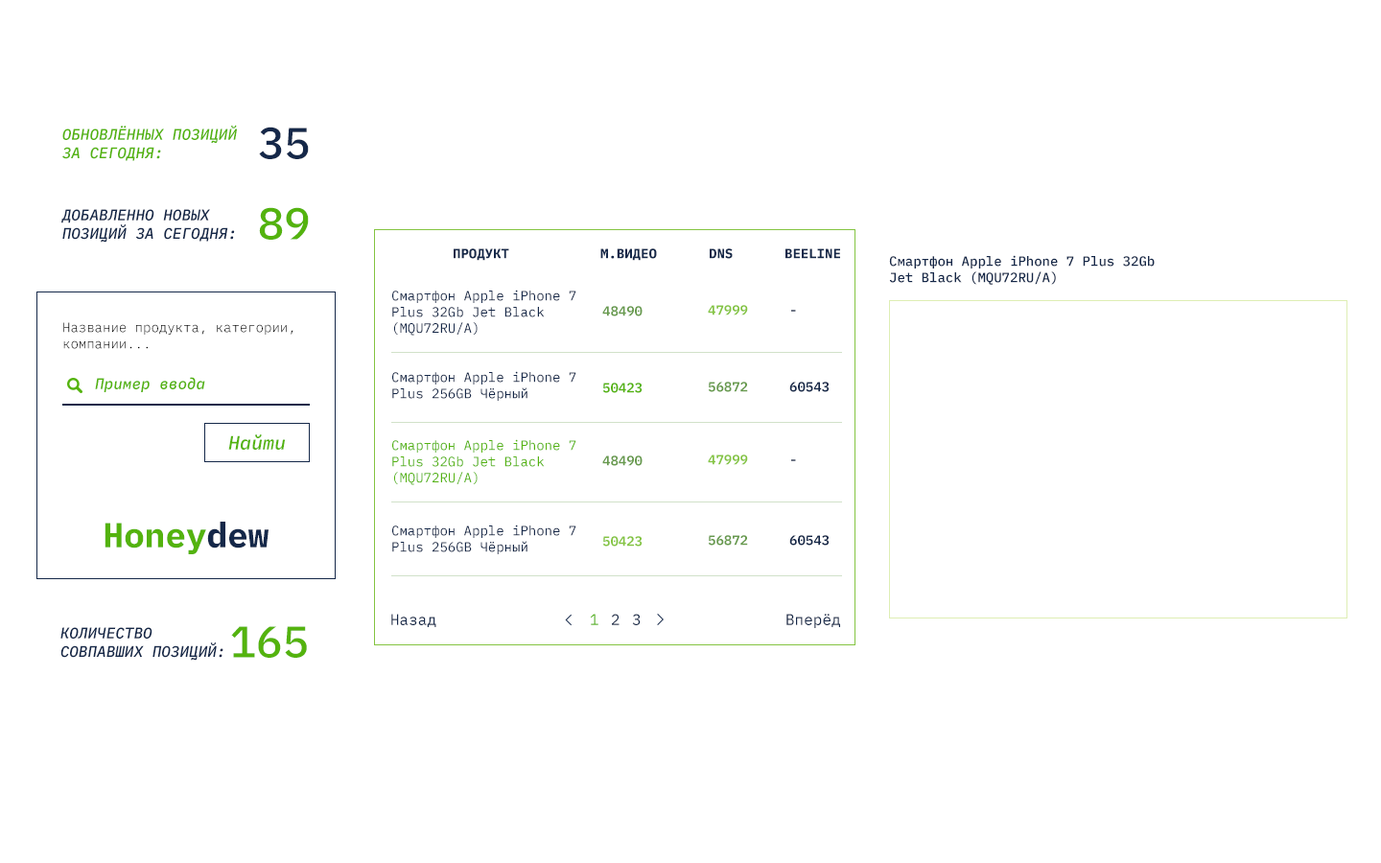
<style>
.page{position:relative;width:1381px;height:863px;background:#ffffff}
.page>*{position:absolute;margin:0}
.t1{font:15.3px "IBMPlexMono-MediumItalic";color:#54b30e;text-transform:uppercase}
.t2{font:44.1px "IBMPlexMono-Medium";color:#152849;text-transform:uppercase}
.t3{font:15.3px "IBMPlexMono-MediumItalic";color:#152849;text-transform:uppercase}
.t4{font:44.1px "IBMPlexMono-Medium";color:#54b30e;text-transform:uppercase}
.t5{font:13.4px "IBMPlexMono-Bold";color:#152849;text-transform:uppercase}
.t6{font:13.4px "IBMPlexMono-Medium";color:#152849}
.t7{font:13.4px "IBMPlexMono";color:#152849}
.t8{font:13.4px "IBMPlexMono-SemiBold";color:#679a4d}
.t9{font:13.4px "IBMPlexMono-SemiBold";color:#84c441}
.t10{font:13.4px "IBMPlexMono-SemiBold"}
.t11{font:13.4px "IBMPlexMono-Light";color:#000000}
.t12{font:15.3px "IBMPlexMono-MediumItalic";color:#54b30e}
.t13{font:13.4px "IBMPlexMono-SemiBold";color:#54b30e}
.t14{font:13.4px "IBMPlexMono-SemiBold";color:#152849}
.t15{font:19.2px "IBMPlexMono-MediumItalic";color:#54b30e}
.t16{font:13.4px "IBMPlexMono";color:#54b30e}
.t17{font:34.5px "IBMPlexMono-Bold";color:#54b30e}
.t18{font:34.5px "IBMPlexMono-Bold";color:#152849}
.t19{font:15.3px "IBMPlexMono";color:#152849}
.t20{font:15.3px "IBMPlexMono"}
</style>
<div class="page">
<p class="t1" style="left:62px;top:125px;width:175px;height:36px">Обновлённых позиций за сегодня:</p>
<p class="t2" style="left:259px;top:127px;width:50px;height:32px">35</p>
<p class="t3" style="left:61px;top:209px;width:174px;height:34px">Добавленно Новых <br>позиций за сегодня:</p>
<p class="t4" style="left:259px;top:207px;width:50px;height:33px">89</p>
<p class="t5" style="left:454px;top:248px;width:55px;height:13px">Продукт</p>
<p class="t5" style="left:600px;top:248px;width:57px;height:13px">М.Видео</p>
<p class="t5" style="left:710px;top:248px;width:23px;height:11px">DNS</p>
<p class="t5" style="left:786px;top:248px;width:54px;height:11px">Beeline</p>
<p class="t6" style="left:889px;top:255px;width:266px;height:30px">Смартфон Apple iPhone 7 Plus 32Gb Jet Black (MQU72RU/A)</p>
<p class="t7" style="left:392px;top:290px;width:184px;height:46px">Смартфон Apple iPhone 7 Plus 32Gb Jet Black (MQU72RU/A)</p>
<p class="t8" style="left:602px;top:306px;width:41px;height:11px">48490</p>
<p class="t9" style="left:708px;top:305px;width:40px;height:11px">47999</p>
<p class="t10" style="left:791px;top:310px;width:5px;height:2px">-</p>
<p class="t11" style="left:63px;top:322px;width:231px;height:27px">Название продукта, категории, компании...</p>
<p class="t12" style="left:95px;top:377px;width:110px;height:15px">Пример ввода</p>
<p class="t7" style="left:392px;top:371px;width:184px;height:30px">Смартфон Apple iPhone 7 Plus 256GB Чёрный</p>
<p class="t13" style="left:602px;top:383px;width:41px;height:10px">50423</p>
<p class="t8" style="left:708px;top:382px;width:40px;height:10px">56872</p>
<p class="t14" style="left:789px;top:382px;width:41px;height:10px">60543</p>
<p class="t15" style="left:228px;top:435px;width:57px;height:15px">Найти</p>
<p class="t16" style="left:392px;top:439px;width:184px;height:46px">Смартфон Apple iPhone 7 Plus 32Gb Jet Black (MQU72RU/A)</p>
<p class="t8" style="left:602px;top:456px;width:41px;height:10px">48490</p>
<p class="t9" style="left:708px;top:455px;width:40px;height:10px">47999</p>
<p class="t10" style="left:791px;top:459px;width:5px;height:2px">-</p>
<p class="t17" style="left:105px;top:522px;width:164px;height:32px">Honey<span class="t18">dew</span></p>
<p class="t7" style="left:392px;top:525px;width:184px;height:29px">Смартфон Apple iPhone 7 Plus 256GB Чёрный</p>
<p class="t9" style="left:602px;top:536px;width:41px;height:11px">50423</p>
<p class="t8" style="left:708px;top:535px;width:40px;height:11px">56872</p>
<p class="t14" style="left:789px;top:535px;width:41px;height:11px">60543</p>
<p class="t19" style="left:391px;top:614px;width:45px;height:13px">Назад</p>
<p class="t20" style="left:590px;top:614px;width:9px;height:11px">1</p>
<p class="t19" style="left:612px;top:614px;width:8px;height:11px">2</p>
<p class="t19" style="left:632px;top:614px;width:9px;height:11px">3</p>
<p class="t19" style="left:787px;top:614px;width:53px;height:14px">Вперёд</p>
<p class="t3" style="left:60px;top:627px;width:163px;height:34px">Количество <br>совпавших позиций:</p>
<p class="t4" style="left:231px;top:626px;width:76px;height:32px">165</p>
</div>
